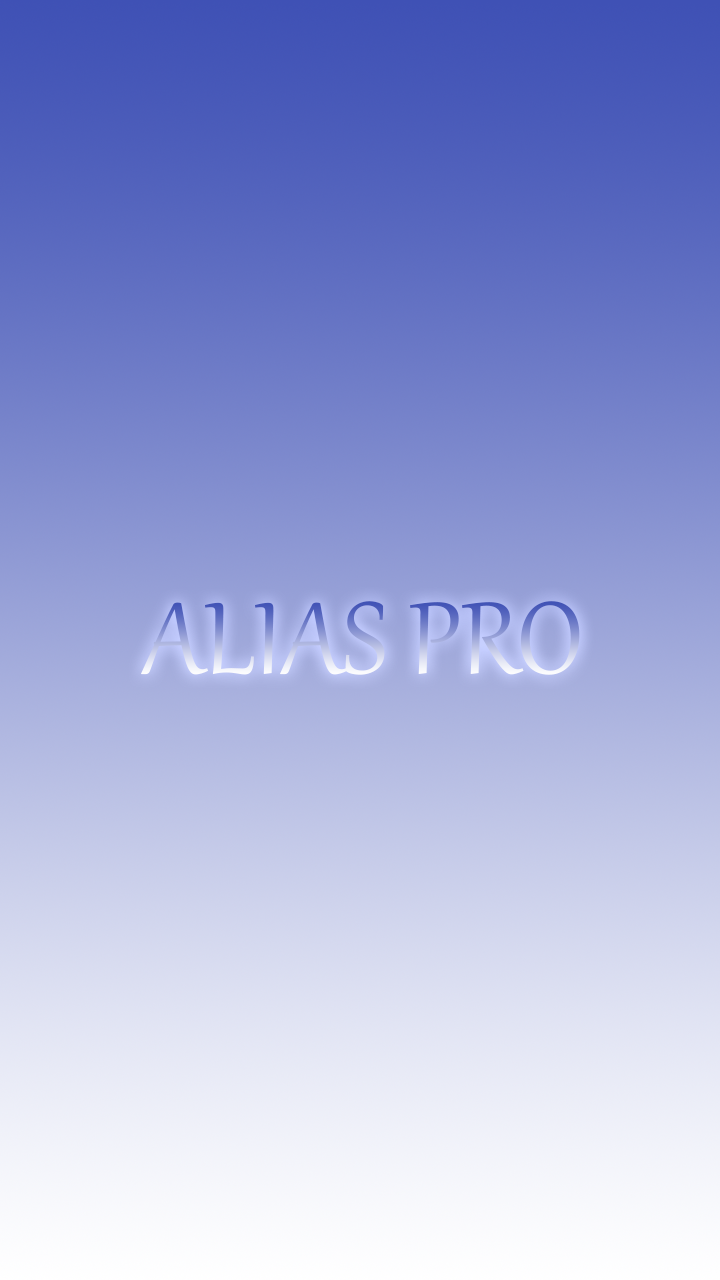
<style>
.page{position:relative;width:720px;height:1280px}
.page>*{position:absolute;margin:0}
.t1{font:125px "Gabriola"}
</style>
<div class="page">
<p class="t1" style="left:141px;top:601px;width:439px;height:74px">ALIAS PRO</p>
</div>
